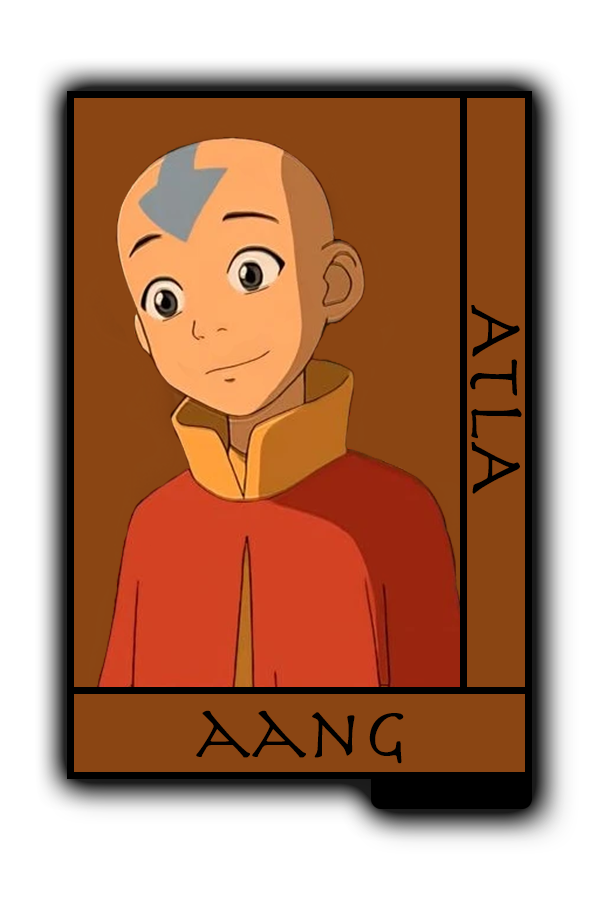
<style>
.page{position:relative;width:600px;height:900px;background:#8a4513}
.page>*{position:absolute;margin:0}
.t1{font:80.7px "Herculanum";color:#000000}
.t2{font:75px "Herculanum";color:#000000}
</style>
<div class="page">
<p class="t1" style="left:470px;top:305px;width:52px;height:189px;rotate:90deg">ATLA</p>
<p class="t2" style="left:196px;top:710px;width:208px;height:54px">aang</p>
</div>
